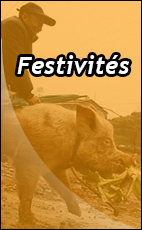
<style>
.page{position:relative;width:142px;height:230px}
.page>*{position:absolute;margin:0}
.t1{font:24px "Trebuchet-BoldItalic";color:#ffffff}
</style>
<div class="page">
<p class="t1" style="left:17px;top:55px;width:112px;height:19px">Festivités</p>
</div>
